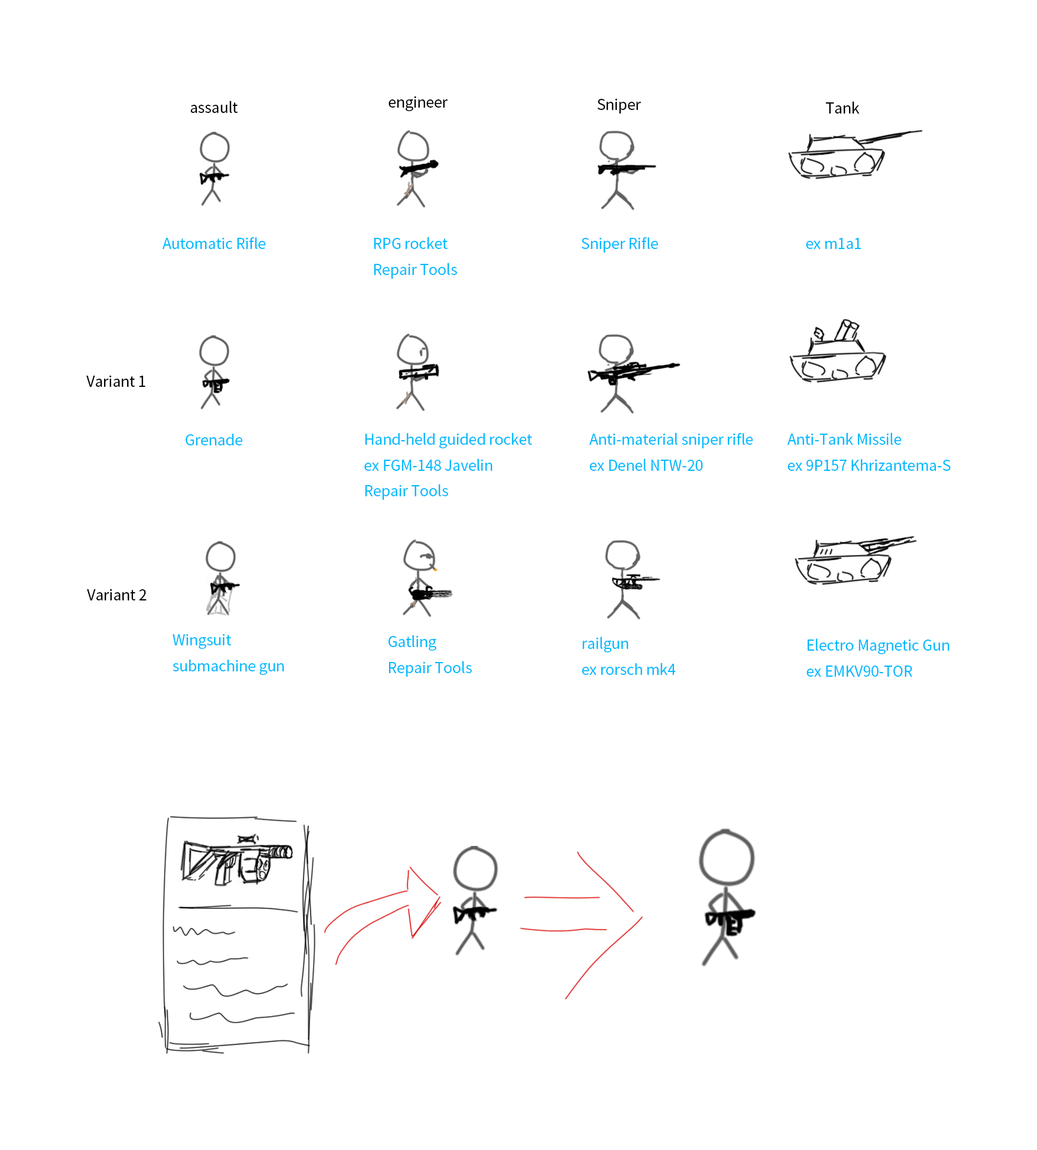
<style>
.page{position:relative;width:1037px;height:1150px;background:#ffffff}
.page>*{position:absolute;margin:0}
.t1{font:14.8px "SourceHanSansCN-Regular";letter-spacing:-0.01em;color:#000000}
.t2{font:14.8px "SourceHanSansCN-Regular";letter-spacing:-0.01em;color:#00baff}
</style>
<div class="page">
<p class="t1" style="left:190px;top:101px;width:48px;height:12px">assault</p>
<p class="t1" style="left:389px;top:96px;width:59px;height:15px">engineer</p>
<p class="t1" style="left:597px;top:98px;width:44px;height:16px">Sniper</p>
<p class="t1" style="left:826px;top:101px;width:34px;height:13px">Tank</p>
<p class="t2" style="left:162px;top:237px;width:104px;height:12px">Automatic Rifle</p>
<p class="t2" style="left:374px;top:237px;width:83px;height:42px">RPG rocket<br>Repair Tools</p>
<p class="t2" style="left:581px;top:237px;width:77px;height:16px">Sniper Rifle</p>
<p class="t2" style="left:806px;top:238px;width:56px;height:11px">ex m1a1</p>
<p class="t1" style="left:86px;top:375px;width:59px;height:12px">Variant 1</p>
<p class="t2" style="left:186px;top:433px;width:56px;height:12px">Grenade</p>
<p class="t2" style="left:364px;top:432px;width:168px;height:68px">Hand-held guided rocket<br>ex FGM-148 Javelin<br>Repair Tools</p>
<p class="t2" style="left:589px;top:432px;width:164px;height:39px">Anti-material sniper rifle<br>ex Denel NTW-20</p>
<p class="t2" style="left:787px;top:432px;width:164px;height:39px">Anti-Tank Missile<br>ex 9P157 Khrizantema-S</p>
<p class="t1" style="left:87px;top:588px;width:60px;height:12px">Variant 2</p>
<p class="t2" style="left:173px;top:633px;width:111px;height:42px">Wingsuit<br>submachine gun</p>
<p class="t2" style="left:389px;top:635px;width:83px;height:42px">Gatling<br>Repair Tools</p>
<p class="t2" style="left:582px;top:636px;width:94px;height:39px">railgun<br>ex rorsch mk4</p>
<p class="t2" style="left:807px;top:638px;width:143px;height:39px">Electro Magnetic Gun<br>ex EMKV90-TOR</p>
</div>
